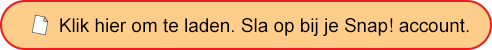
<style>
.page{position:relative;width:492px;height:50px;background:#fecd8a}
.page>*{position:absolute;margin:0}
.t1{font:18.9px "ArialMT";color:#000000}
</style>
<div class="page">
<p class="t1" style="left:60px;top:18px;width:409px;height:18px">Klik hier om te laden. Sla op bij je Snap! account.</p>
</div>
